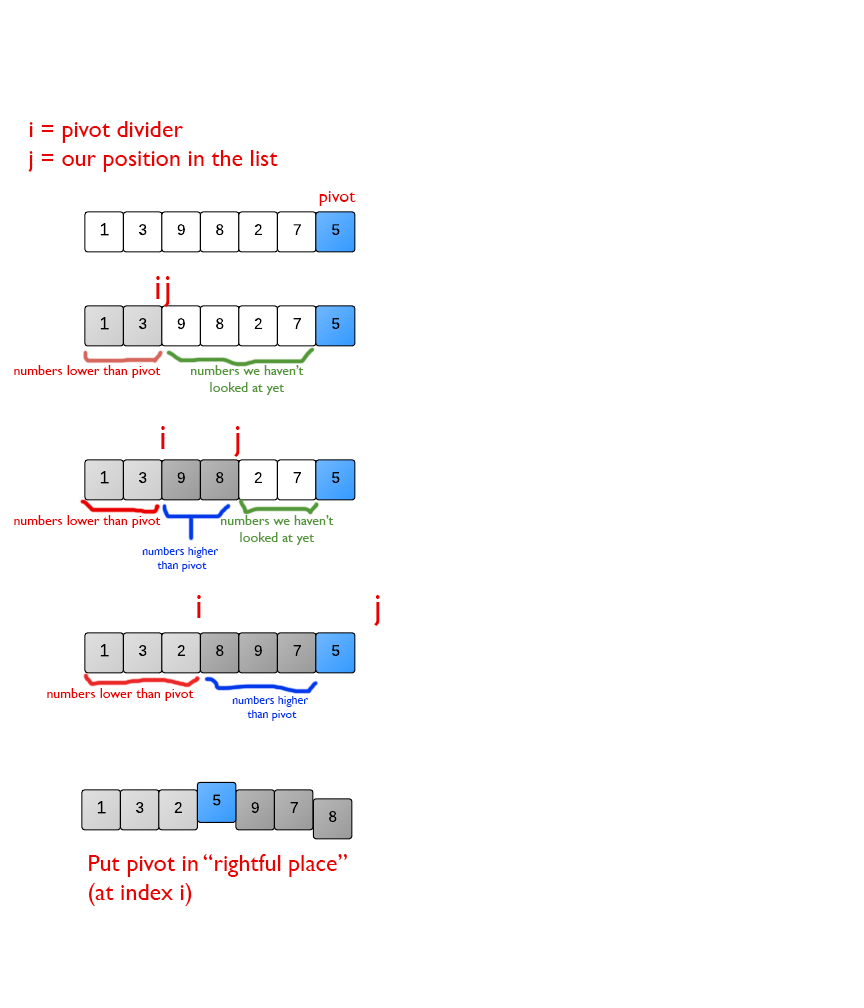
<style>
.page{position:relative;width:864px;height:1008px;background:#ffffff}
.page>*{position:absolute;margin:0}
.t1{font:24px "GillSans";color:#e90000}
.t2{font:18px "GillSans";color:#e90000}
.t3{font:36px "GillSans";color:#e90000}
.t4{font:14px "GillSans";color:#e90000}
.t5{font:14px "GillSans";color:#539738}
.t6{font:12px "GillSans";color:#0037e9}
</style>
<div class="page">
<p class="t1" style="left:28px;top:121px;width:250px;height:51px">i = pivot divider<br>j = our position in the list</p>
<p class="t2" style="left:319px;top:191px;width:37px;height:15px">pivot</p>
<p class="t3" style="left:156px;top:276px;width:4px;height:23px">i</p>
<p class="t3" style="left:163px;top:276px;width:7px;height:31px">j</p>
<p class="t4" style="left:14px;top:365px;width:147px;height:13px">numbers lower than pivot</p>
<p class="t5" style="left:191px;top:365px;width:113px;height:30px;text-align:center">numbers we haven’t<br>looked at yet</p>
<p class="t3" style="left:161px;top:426px;width:4px;height:23px">i</p>
<p class="t3" style="left:233px;top:426px;width:7px;height:31px">j</p>
<p class="t4" style="left:14px;top:515px;width:147px;height:13px">numbers lower than pivot</p>
<p class="t5" style="left:221px;top:515px;width:113px;height:30px;text-align:center">numbers we haven’t<br>looked at yet</p>
<p class="t6" style="left:142px;top:547px;width:77px;height:25px;text-align:center">numbers higher <br>than pivot</p>
<p class="t3" style="left:197px;top:595px;width:4px;height:23px">i</p>
<p class="t3" style="left:373px;top:595px;width:7px;height:31px">j</p>
<p class="t4" style="left:47px;top:688px;width:147px;height:13px">numbers lower than pivot</p>
<p class="t6" style="left:232px;top:696px;width:77px;height:25px;text-align:center">numbers higher <br>than pivot</p>
<p class="t1" style="left:88px;top:854px;width:259px;height:52px">Put pivot in “rightful place”<br>(at index i)</p>
</div>
